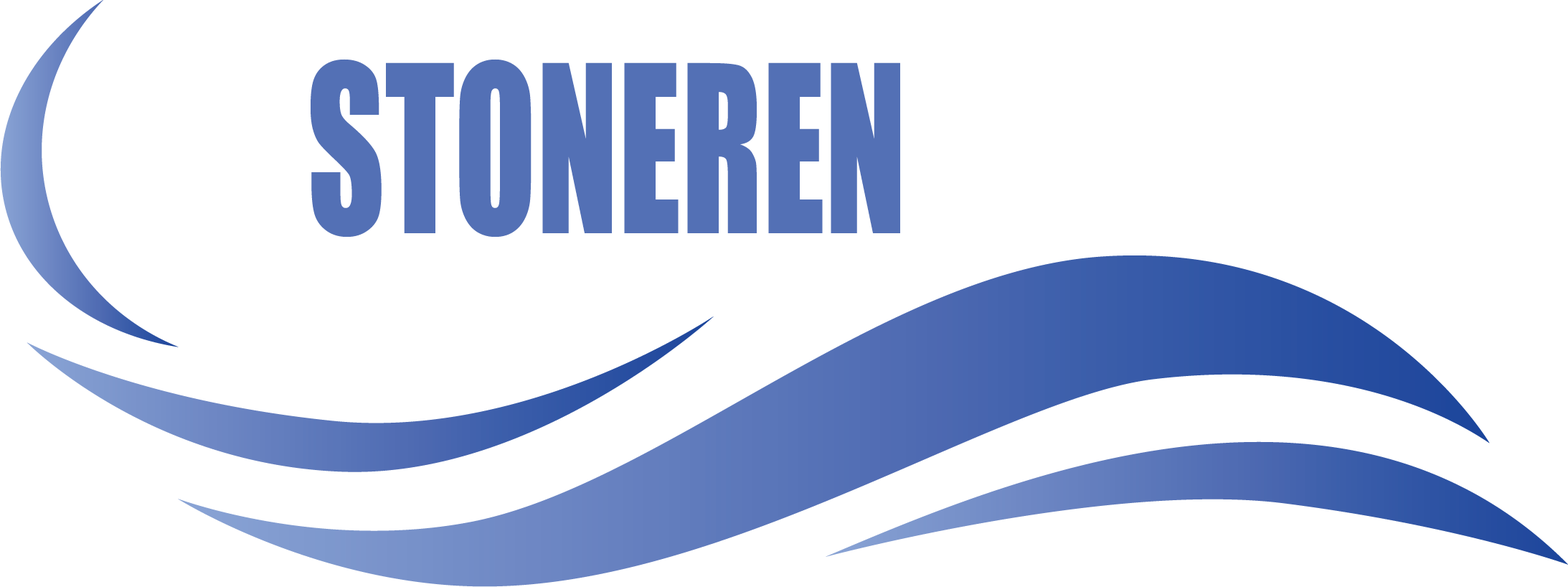
<style>
.page{position:relative;width:1568px;height:587px;background:#ffffff}
.page>*{position:absolute;margin:0}
.t1{font:215.2px "Impact";color:#5370b5;scale:0.7 1}
</style>
<div class="page">
<p class="t1" style="left:311px;top:59px;width:589px;height:178px">STONEREN</p>
</div>
